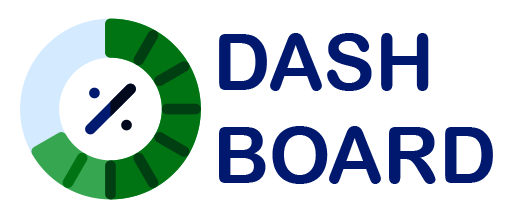
<style>
.page{position:relative;width:512px;height:217px;background:#ffffff}
.page>*{position:absolute;margin:0}
.t1{font:77.6px "ArialRoundedMTBold";color:#00196f}
</style>
<div class="page">
<p class="t1" style="left:219px;top:33px;width:274px;height:151px">DASH<br>BOARD</p>
</div>
